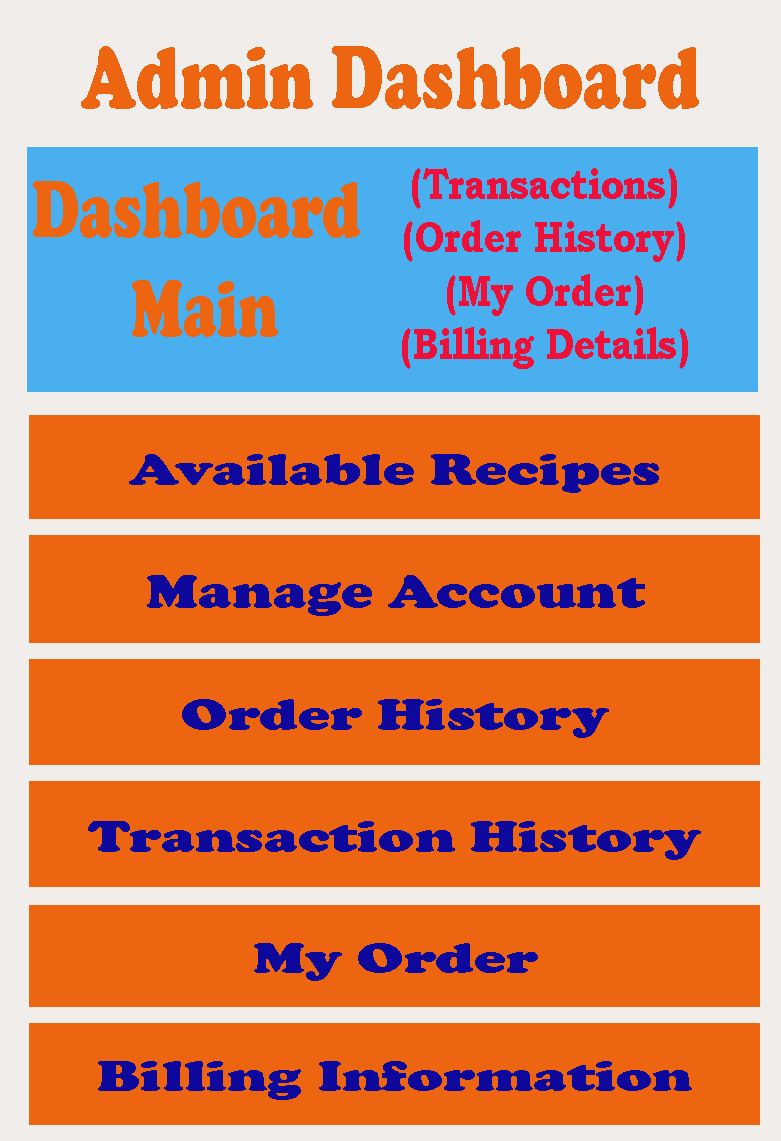
<style>
.page{position:relative;width:781px;height:1141px;background:#ed6511}
.page>*{position:absolute;margin:0}
.t1{font:91.2px "CooperBlack";color:#ed6511;scale:0.74 1}
.t2{font:44.5px "BookmanOldStyle-Bold";color:#ed113a;scale:0.81 1}
.t3{font:82.1px "CooperBlack";color:#ed6511;scale:0.73 1}
.t4{font:45.6px "CooperBlack";color:#0e079b;scale:1.32 1}
.t5{font:47.3px "CooperBlack";color:#0e079b;scale:1.27 1}
.t6{font:46.4px "CooperBlack";color:#0e079b;scale:1.29 1}
.t7{font:44.7px "CooperBlack";color:#0e079b;scale:1.34 1}
</style>
<div class="page">
<p class="t1" style="left:81px;top:46px;width:618px;height:63px">Admin Dashboard</p>
<p class="t2" style="left:402px;top:168px;width:286px;height:201px;text-align:center">(Transactions)<br>(Order History)<br>(My Order)<br>(Billing Details)</p>
<p class="t3" style="left:33px;top:181px;width:327px;height:156px;text-align:center">Dashboard <br>Main</p>
<p class="t4" style="left:129px;top:454px;width:530px;height:39px">Available Recipes</p>
<p class="t5" style="left:147px;top:575px;width:498px;height:41px">Manage Account</p>
<p class="t6" style="left:182px;top:699px;width:427px;height:39px">Order History</p>
<p class="t6" style="left:88px;top:821px;width:613px;height:39px">Transaction History</p>
<p class="t7" style="left:254px;top:943px;width:284px;height:38px">My Order</p>
<p class="t7" style="left:98px;top:1061px;width:594px;height:39px">Billing Information</p>
</div>
